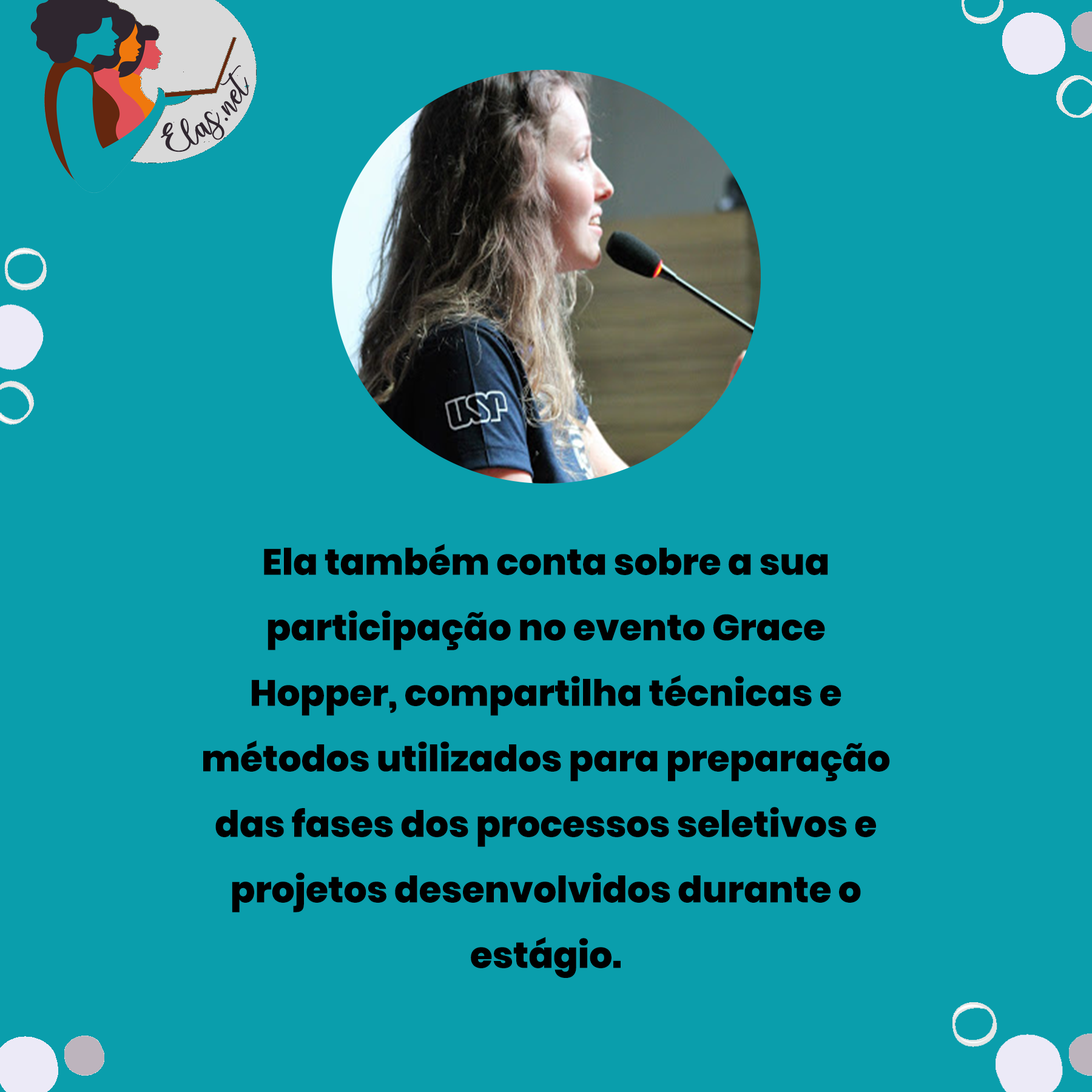
<style>
.page{position:relative;width:1092px;height:1092px;background:#0a9eac}
.page>*{position:absolute;margin:0}
.t1{font:25px "charlinda-Regular";color:#2f262f;scale:1.18 1}
.t2{font:36.4px/65.5px "Poppins-ExtraBold";color:#000000}
</style>
<div class="page">
<p class="t1" style="left:161px;top:65px;width:88px;height:87px;rotate:-42deg">Elas.net</p>
<p class="t2" style="left:203px;top:544px;width:687px;height:434px;text-align:center">Ela também conta sobre a sua participação no evento Grace Hopper, compartilha técnicas e métodos utilizados para preparação das fases dos processos seletivos e projetos desenvolvidos durante o estágio.</p>
</div>
